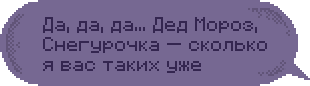
<style>
.page{position:relative;width:310px;height:86px;background:#766892}
.page>*{position:absolute;margin:0}
.t1{font:16px/20px "F77-Minecraft";color:#342650}
</style>
<div class="page">
<p class="t1" style="left:43px;top:17px;width:224px;height:56px">Да, да, да... Дед Мороз, <br>Снегурочка — сколько<br>я вас таких уже</p>
</div>
